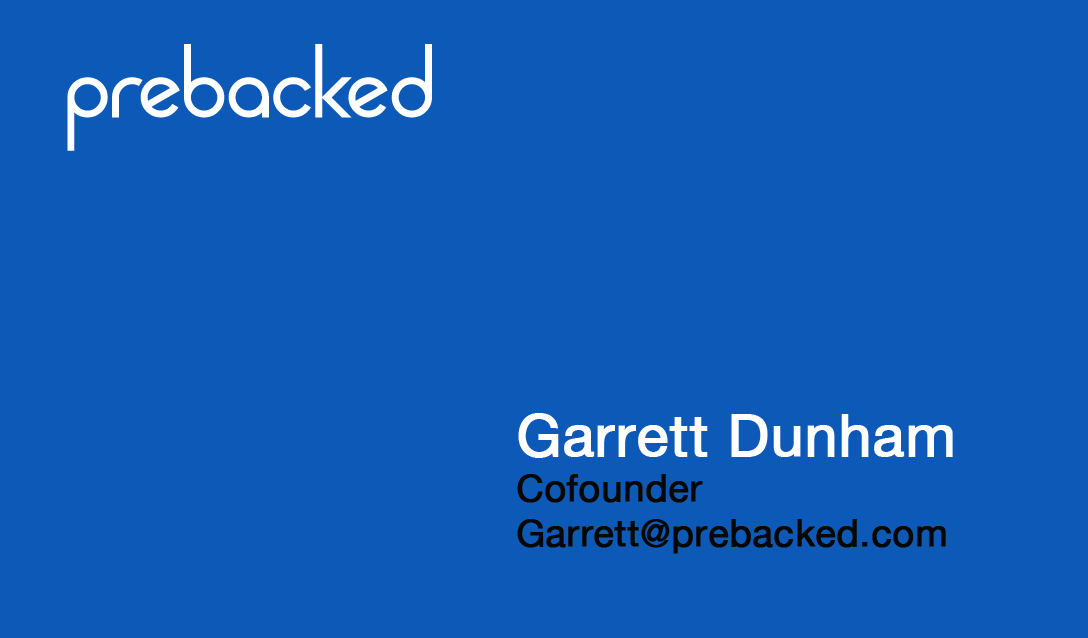
<style>
.page{position:relative;width:1088px;height:638px;background:#0c59b8}
.page>*{position:absolute;margin:0}
.t1{font:37.5px "HelveticaNeue";color:#060808;font-weight:bold}
.t2{font:58.3px "HelveticaNeue";color:#ffffff;font-weight:bold}
</style>
<div class="page">
<p class="t1" style="left:517px;top:413px;width:436px;height:141px"><span class="t2">Garrett Dunham <br></span>Cofounder <br>Garrett@prebacked.com</p>
</div>
